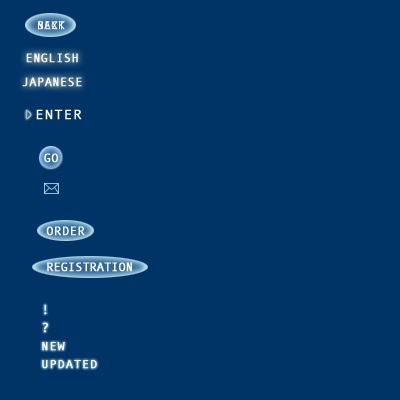
<style>
.page{position:relative;width:400px;height:400px;background:#003366}
.page>*{position:absolute;margin:0}
.t1{font:11px "AndaleMono";letter-spacing:0.01em;color:#fafcfd;font-weight:bold}
.t2{font:12px/12px "AndaleMono";letter-spacing:0.01em;color:#fafcfd;font-weight:bold}
.t3{font:13.3px "AndaleMono";letter-spacing:0.05em;color:#ffffff;font-weight:bold;scale:1.05 1}
.t4{font:12px "AndaleMono";letter-spacing:0.01em;color:#ffffff;font-weight:bold}
.t5{font:12px/12px "AndaleMono";letter-spacing:-0.025em;color:#ffffff;font-weight:bold}
.t6{font:12px/12px "AndaleMono";letter-spacing:0.025em;color:#ffffff;font-weight:bold}
.t7{font:11.4px/9px "AndaleMono";letter-spacing:0.05em;color:#ffffff;font-weight:bold;scale:1.05 1}
.t8{font:13.3px/9px "AndaleMono";letter-spacing:0.05em;color:#ffffff;font-weight:bold;scale:1.05 1}
</style>
<div class="page">
<p class="t1" style="left:38px;top:21px;width:27px;height:9px">BACK</p>
<p class="t1" style="left:38px;top:21px;width:27px;height:9px">NEXT</p>
<p class="t2" style="left:22px;top:53px;width:60px;height:34px;text-align:center">ENGLISH<br><br>JAPANESE</p>
<p class="t3" style="left:36px;top:109px;width:46px;height:11px">ENTER</p>
<p class="t4" style="left:44px;top:153px;width:14px;height:10px">GO</p>
<p class="t5" style="left:46px;top:226px;width:86px;height:46px"><span class="t6">ORDER<br><br><br></span>REGISTRATION</p>
<p class="t7" style="left:42px;top:304px;width:55px;height:65px"><span class="t8">!<br><br>?<br><br></span>NEW<br><br>UPDATED</p>
</div>
